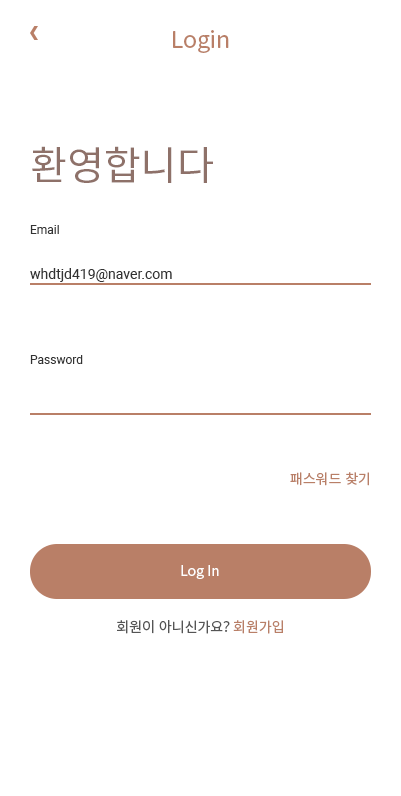
<style>
.page{position:relative;width:401px;height:796px;background:#ffffff}
.page>*{position:absolute;margin:0}
.t1{font:23px "NotoSansKR-Regular";color:#b97f67}
.t2{font:40px "NotoSansKR-Regular";color:#8e7169}
.t3{font:12px "Roboto-Regular";color:#333333}
.t4{font:14px "Roboto-Regular";color:#333333}
.t5{font:14px "NotoSansKR-Regular";color:#b97f67}
.t6{font:14px "NotoSansKR-Regular";color:#ffffff}
.t7{font:14px "NotoSansKR-Regular";color:#555555}
</style>
<div class="page">
<p class="t1" style="left:173px;top:30px;width:56px;height:23px">Login</p>
<p class="t2" style="left:32px;top:146px;width:181px;height:37px">환영합니다</p>
<p class="t3" style="left:30px;top:225px;width:29px;height:9px">Email</p>
<p class="t4" style="left:30px;top:268px;width:142px;height:14px">whdtjd419@naver.com</p>
<p class="t3" style="left:30px;top:355px;width:53px;height:9px">Password</p>
<p class="t5" style="left:290px;top:472px;width:79px;height:14px">패스워드 찾기</p>
<p class="t6" style="left:181px;top:565px;width:38px;height:14px">Log In</p>
<p class="t7" style="left:117px;top:620px;width:166px;height:14px">회원이 아니신가요? <span class="t5">회원가입</span></p>
</div>
